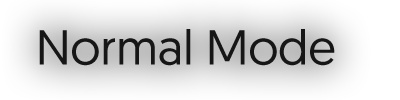
<style>
.page{position:relative;width:400px;height:100px}
.page>*{position:absolute;margin:0}
.t1{font:48.9px "Geomanist-Regular";color:#161616}
</style>
<div class="page">
<p class="t1" style="left:39px;top:29px;width:296px;height:37px">Normal Mode</p>
</div>
